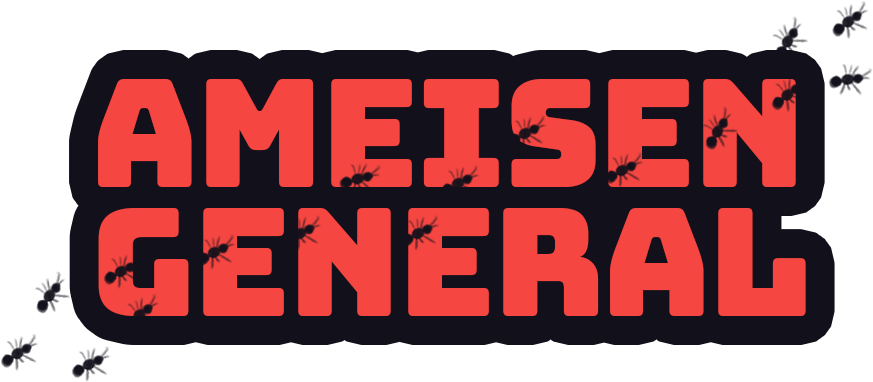
<style>
.page{position:relative;width:873px;height:382px;background:#12101a}
.page>*{position:absolute;margin:0}
.t1{font:150px/129px "Bungee-Regular";letter-spacing:-0.02em;color:#f54641}
</style>
<div class="page">
<p class="t1" style="left:98px;top:79px;width:708px;height:237px">AMEISEN<br>GENERAL</p>
</div>
